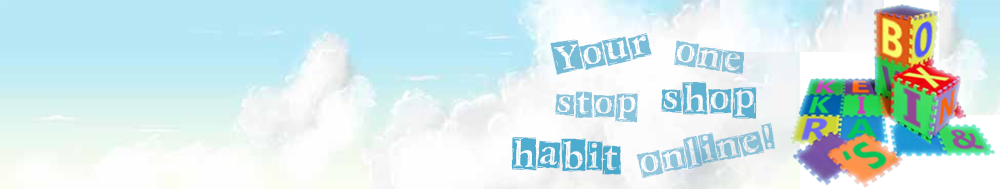
<style>
.page{position:relative;width:1000px;height:189px}
.page>*{position:absolute;margin:0}
.t1{font:37px "CKScratchyBox";color:#78bcd7}
.t2{font:37px "CKScratchyBox";color:#8ac3d9}
.t3{font:37px "CKScratchyBox";color:#5eb1d0}
.t4{font:33.7px "CKScratchyBox";color:#8ac4db}
.t5{font:37px "CKScratchyBox";color:#8bc1d8}
.t6{font:37px "CKScratchyBox";color:#4daccd}
</style>
<div class="page">
<p class="t1" style="left:550px;top:33px;width:102px;height:42px;rotate:-12deg">Your</p>
<p class="t2" style="left:674px;top:40px;width:71px;height:35px;rotate:9deg">one</p>
<p class="t3" style="left:661px;top:81px;width:96px;height:38px">shop</p>
<p class="t4" style="left:555px;top:91px;width:83px;height:32px;rotate:1deg">stop</p>
<p class="t5" style="left:636px;top:122px;width:139px;height:56px;rotate:-11deg">online!</p>
<p class="t6" style="left:511px;top:137px;width:110px;height:38px;rotate:2deg">habit</p>
</div>
